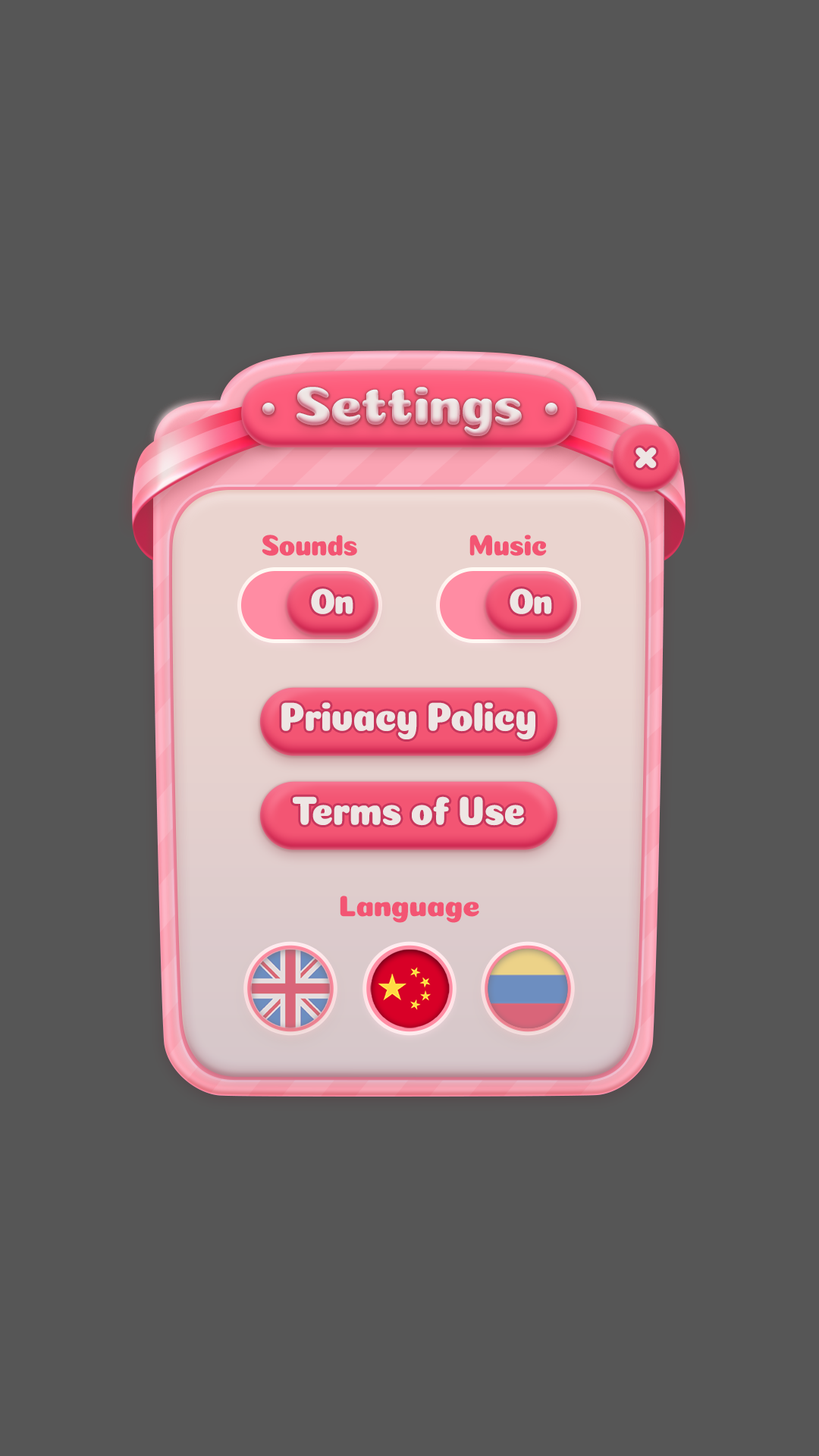
<style>
.page{position:relative;width:819px;height:1456px;background:#565656}
.page>*{position:absolute;margin:0}
.t1{font:54.6px "Coiny-Regular";letter-spacing:-0.025em}
.t2{font:29.8px "Coiny-Regular";letter-spacing:-0.025em;color:#f35573;scale:0.9 1}
.t3{font:36.4px "Coiny-Regular";letter-spacing:-0.05em;color:#eee6e4;scale:0.9 1}
.t4{font:40.9px "Coiny-Regular";letter-spacing:-0.025em;color:#eee6e4;scale:0.9 1}
.t5{font:29.8px "Coiny-Regular";letter-spacing:-0.025em;color:#f35573}
</style>
<div class="page">
<p class="t1" style="left:297px;top:387px;width:225px;height:49px">Settings</p>
<p class="t2" style="left:262px;top:535px;width:95px;height:21px">Sounds</p>
<p class="t2" style="left:469px;top:535px;width:78px;height:21px">Music</p>
<p class="t3" style="left:311px;top:588px;width:42px;height:26px">On</p>
<p class="t3" style="left:510px;top:588px;width:42px;height:26px">On</p>
<p class="t4" style="left:281px;top:702px;width:254px;height:37px">Privacy Policy</p>
<p class="t4" style="left:293px;top:796px;width:231px;height:30px">Terms of Use</p>
<p class="t5" style="left:340px;top:896px;width:139px;height:27px">Language</p>
</div>
